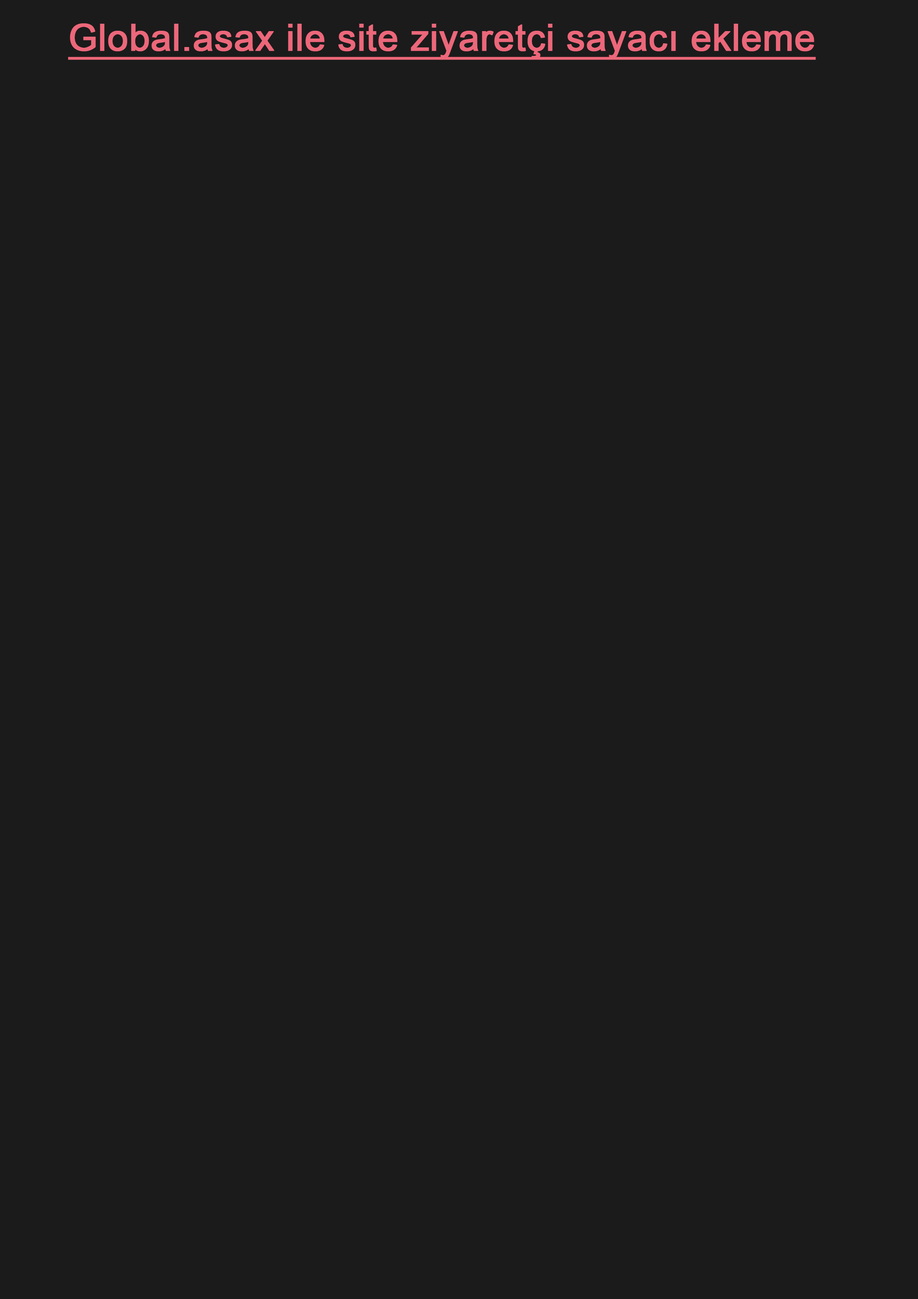
<style>
.page{position:relative;width:918px;height:1299px;background:#1b1b1b}
.page>*{position:absolute;margin:0}
.t1{font:37px "ArialMT";color:#ec677a;font-weight:bold;text-decoration:underline}
</style>
<div class="page">
<p class="t1" style="left:68px;top:23px;width:748px;height:37px">Global.asax ile site ziyaretçi sayacı ekleme</p>
</div>
